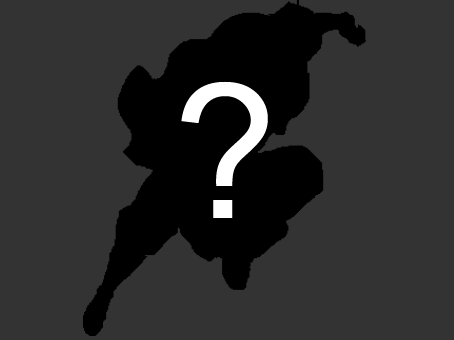
<style>
.page{position:relative;width:454px;height:340px;background:#333333}
.page>*{position:absolute;margin:0}
.t1{font:186.6px "ArialMT";color:#ffffff}
</style>
<div class="page">
<p class="t1" style="left:181px;top:81px;width:87px;height:137px">?</p>
</div>
